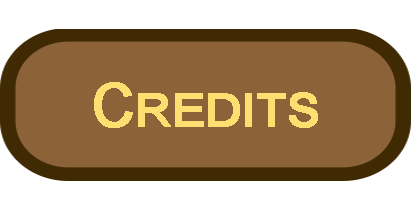
<style>
.page{position:relative;width:411px;height:211px;background:#8c6239}
.page>*{position:absolute;margin:0}
.t1{font:60px "ArialMT";letter-spacing:-0.025em;color:#fede70;font-variant:small-caps;font-weight:bold}
</style>
<div class="page">
<p class="t1" style="left:94px;top:82px;width:224px;height:46px">Credits</p>
</div>
